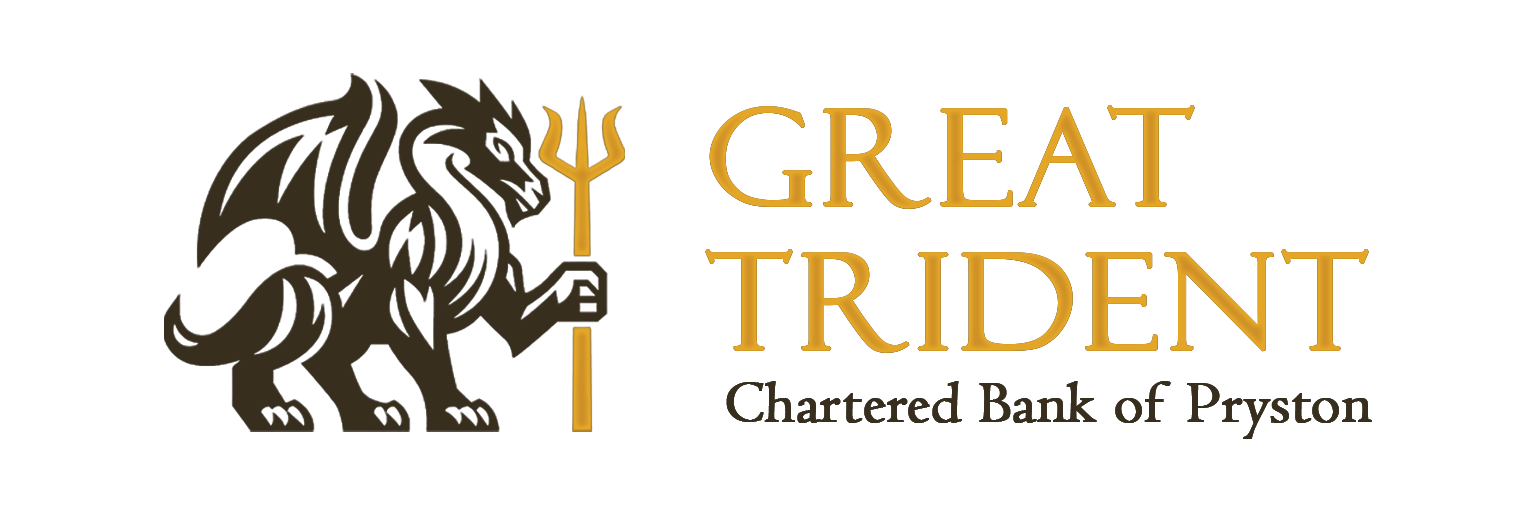
<style>
.page{position:relative;width:1536px;height:512px;background:#ffffff}
.page>*{position:absolute;margin:0}
.t1{font:132px/144px "FelixTitlingMT";letter-spacing:0.025em;color:#cc8e27;text-transform:uppercase;font-weight:bold;scale:1.05 1}
.t2{font:60px "Centaur";letter-spacing:-0.01em;color:#382e1d;font-weight:bold;scale:1.05 1}
.t3{font:132px "FelixTitlingMT";letter-spacing:0.025em;color:#cc8e27;text-transform:uppercase;font-weight:bold;scale:1.05 1}
</style>
<div class="page">
<p class="t1" style="left:705px;top:105px;width:664px;height:248px">Great<br>Trident</p>
<p class="t2" style="left:726px;top:381px;width:646px;height:58px"><span class="t3"><br><br></span> Chartered Bank of Pryston</p>
</div>
